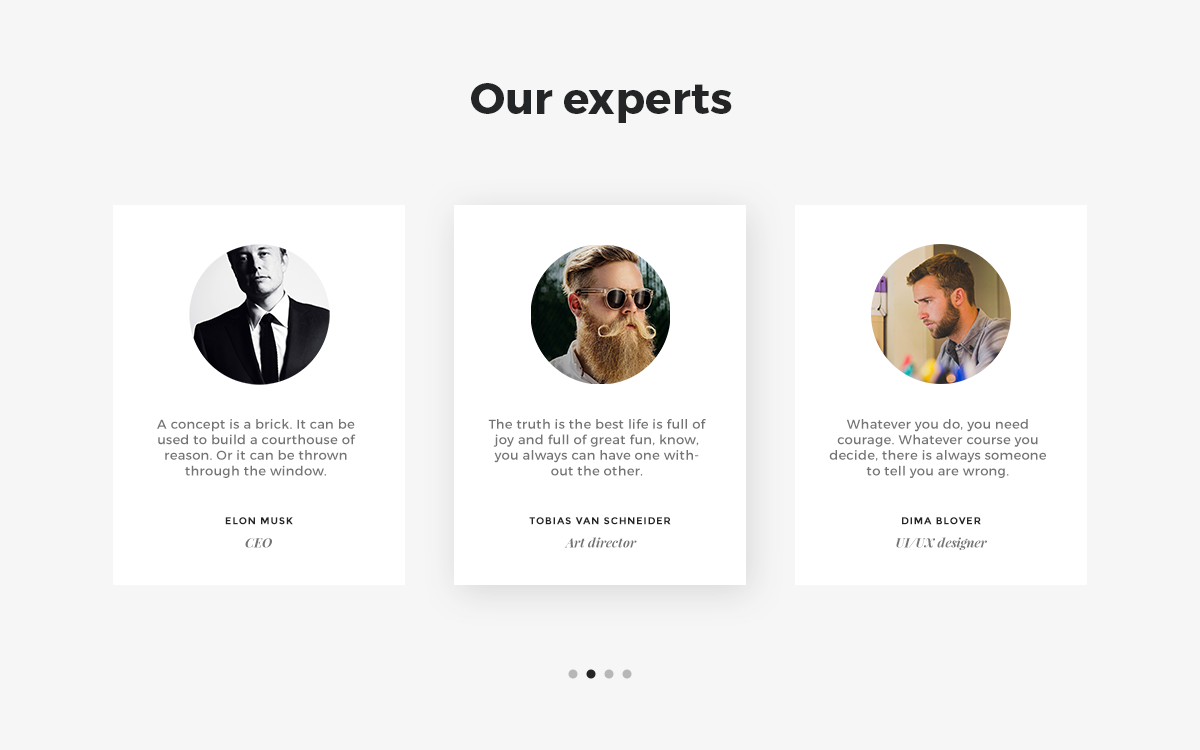
<style>
.page{position:relative;width:1200px;height:750px;background:#f6f6f6}
.page>*{position:absolute;margin:0}
.t1{font:44px "Montserrat-Bold";color:#242526}
.t2{font:13px "Montserrat-Regular";letter-spacing:0.025em;color:#747474}
.t3{font:10px "Montserrat-Bold";letter-spacing:0.08em;color:#242526;text-transform:uppercase}
.t4{font:13px "PlayfairDisplay-BoldItalic";color:#747474}
</style>
<div class="page">
<p class="t1" style="left:471px;top:83px;width:261px;height:40px">Our experts</p>
<p class="t2" style="left:157px;top:419px;width:199px;height:59px;text-align:center">A concept is a brick. It can be used to build a courthouse of reason. Or it can be thrown through the window.</p>
<p class="t2" style="left:488px;top:419px;width:218px;height:57px;text-align:center">The truth is the best life is full of joy and full of great fun, know, you always can have one without the other.</p>
<p class="t2" style="left:829px;top:419px;width:217px;height:59px;text-align:center">Whatever you do, you need courage. Whatever course you decide, there is always someone to tell you are wrong.</p>
<p class="t3" style="left:225px;top:517px;width:68px;height:8px">elon musk</p>
<p class="t3" style="left:529px;top:517px;width:142px;height:8px">tobias van schneider</p>
<p class="t3" style="left:902px;top:517px;width:79px;height:8px">Dima Blover</p>
<p class="t4" style="left:245px;top:538px;width:27px;height:10px">CEO</p>
<p class="t4" style="left:564px;top:537px;width:73px;height:11px">Art director</p>
<p class="t4" style="left:896px;top:537px;width:91px;height:13px">UI/UX designer</p>
</div>
